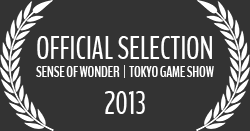
<style>
.page{position:relative;width:250px;height:131px;background:#333333}
.page>*{position:absolute;margin:0}
.t1{font:14.5px "BenchNine-Bold";color:#ffffff}
.t2{font:30.9px "BenchNine-Regular";color:#ffffff}
</style>
<div class="page">
<p class="t1" style="left:36px;top:36px;width:178px;height:78px;text-align:center"><span class="t2">OFFICIAL SELECTION<br></span>SENSE OF WONDER  |  TOKYO GAME SHOW<br><span class="t2">2013</span></p>
</div>
